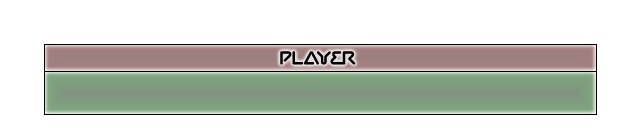
<style>
.page{position:relative;width:640px;height:140px;background:#ffffff}
.page>*{position:absolute;margin:0}
.t1{font:20px "Chilopod-Regular";color:#000000}
</style>
<div class="page">
<p class="t1" style="left:280px;top:51px;width:76px;height:14px">Player</p>
</div>
